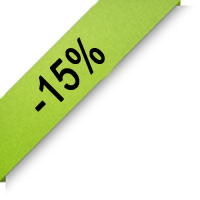
<style>
.page{position:relative;width:200px;height:200px;background:#ffffff}
.page>*{position:absolute;margin:0}
.t1{font:45px "ArialNarrow";color:#000000;font-weight:bold}
</style>
<div class="page">
<p class="t1" style="left:35px;top:37px;width:70px;height:75px;rotate:-45deg">-15%</p>
</div>
